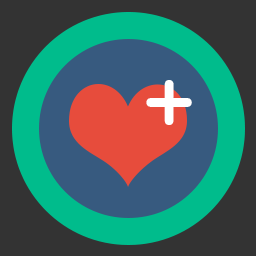
<style>
.page{position:relative;width:256px;height:256px;background:#333333}
.page>*{position:absolute;margin:0}
.t1{font:20.9px "CourierNewPS-BoldMT";color:#ffffff}
</style>
<div class="page">
<p class="t1" style="left:146px;top:80px;width:46px;height:45px">+</p>
</div>
